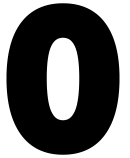
<style>
.page{position:relative;width:130px;height:158px;background:#000000}
.page>*{position:absolute;margin:0}
.t1{font:200px "NunitoSans-Black";letter-spacing:0.025em;color:#000000;font-weight:bold}
</style>
<div class="page">
<p class="t1" style="left:6px;top:3px;width:114px;height:152px">0</p>
</div>
